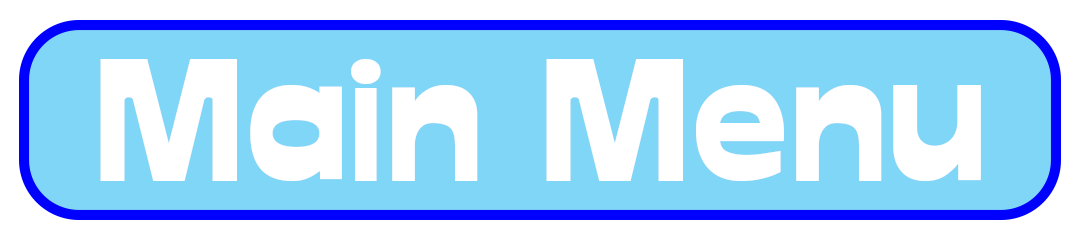
<style>
.page{position:relative;width:1080px;height:240px;background:#7fd6f7}
.page>*{position:absolute;margin:0}
.t1{font:166.7px "Glockenspiel";color:#ffffff}
</style>
<div class="page">
<p class="t1" style="left:100px;top:59px;width:881px;height:122px">Main Menu</p>
</div>
